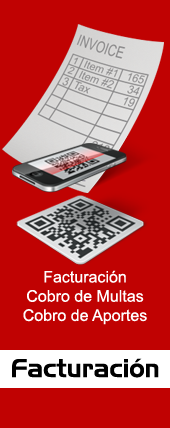
<style>
.page{position:relative;width:170px;height:428px;background:#c00202}
.page>*{position:absolute;margin:0}
.t1{font:16px "ArialMT";color:#ffffff}
.t2{font:25px "AeroRegularSWFTE";color:#000000}
</style>
<div class="page">
<p class="t1" style="left:23px;top:270px;width:124px;height:55px;text-align:center">Facturación<br>Cobro de Multas<br>Cobro de Aportes</p>
<p class="t2" style="left:12px;top:358px;width:147px;height:20px">Facturación</p>
</div>
